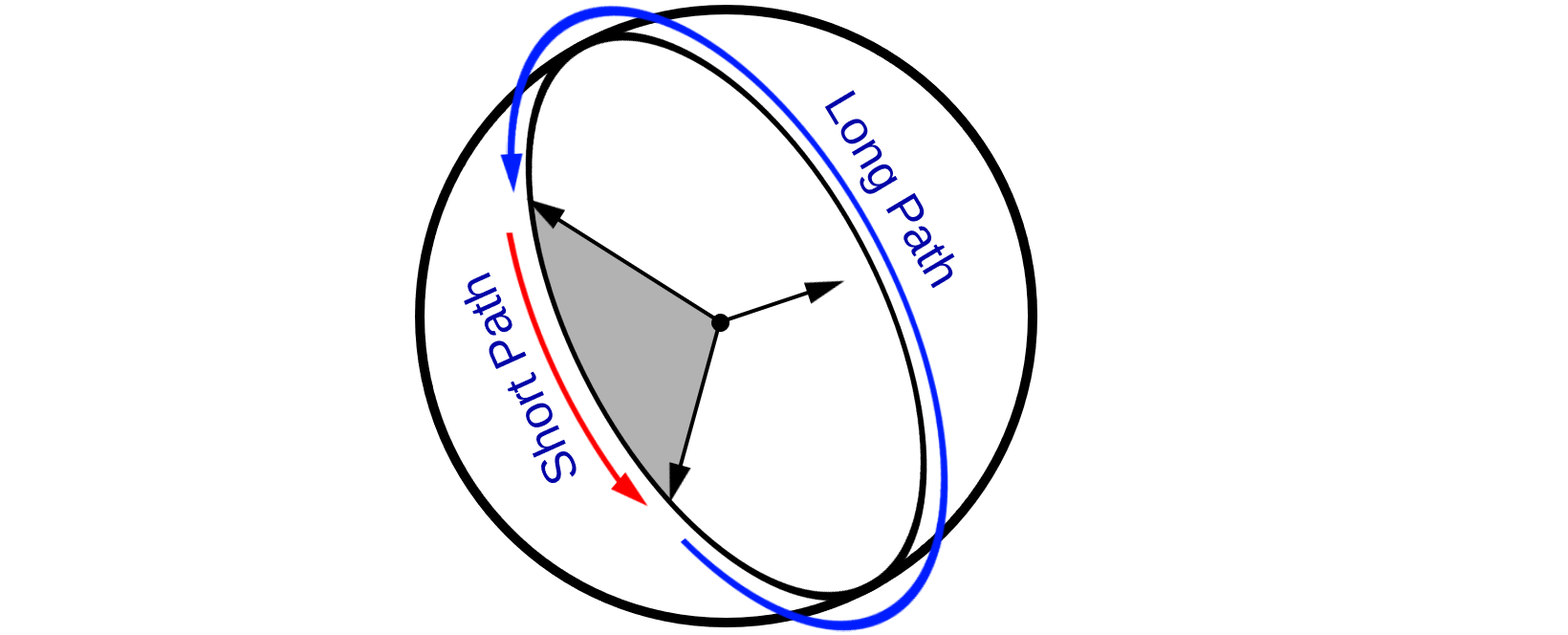
<style>
.page{position:relative;width:1568px;height:635px;background:#ffffff}
.page>*{position:absolute;margin:0}
.t1{font:47.8px "LiberationSans";color:#0105a7}
</style>
<div class="page">
<p class="t1" style="left:825px;top:90px;width:130px;height:199px;rotate:59deg">Long Path</p>
<p class="t1" style="left:464px;top:272px;width:115px;height:213px;rotate:-114deg">Short Path</p>
</div>
